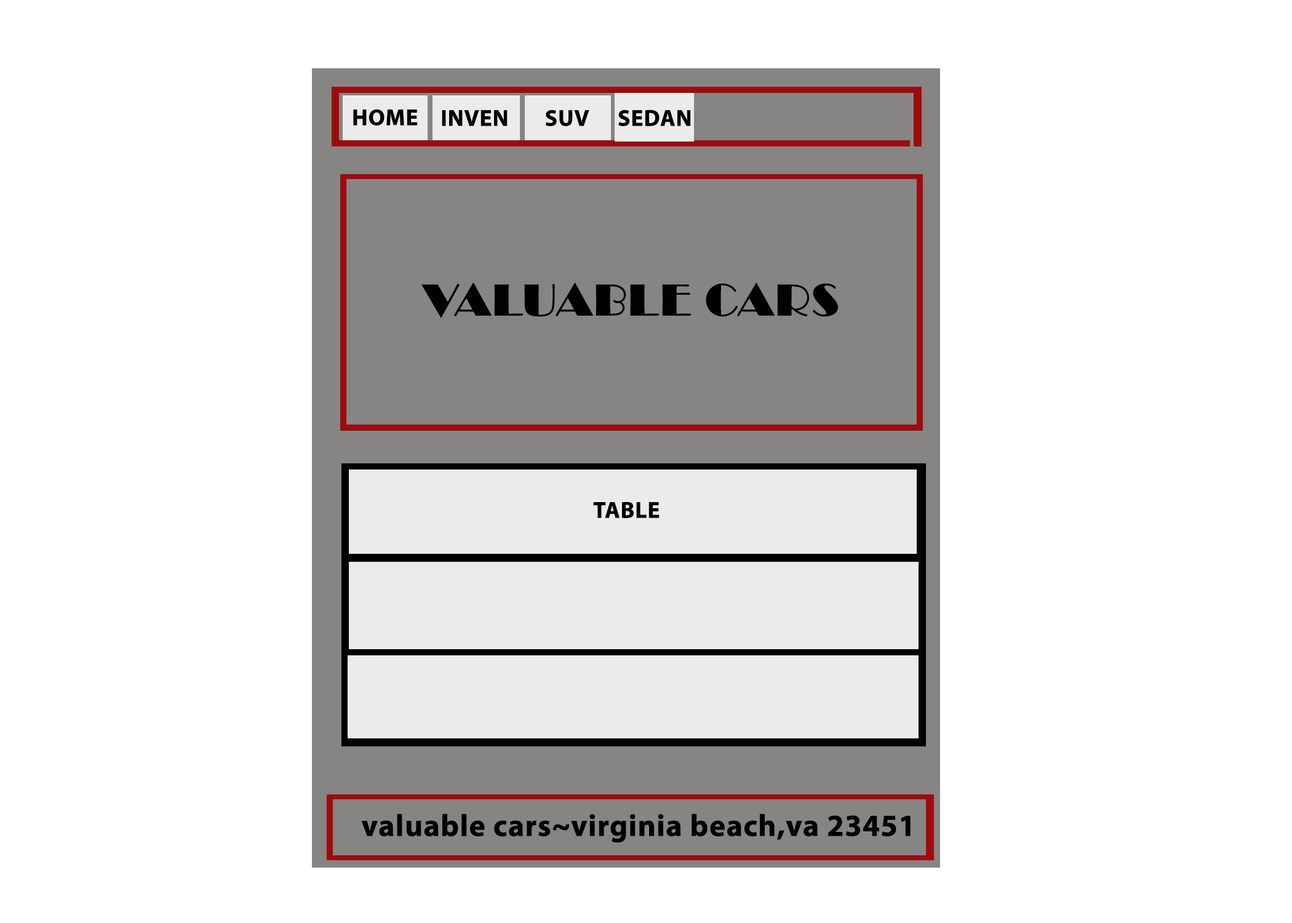
<style>
.page{position:relative;width:1292px;height:923px;background:#ffffff}
.page>*{position:absolute;margin:0}
.t1{font:23.1px "MyriadPro-Bold";color:#010101;font-weight:bold}
.t2{font:46.1px "Broadway";color:#010101;font-weight:bold}
.t3{font:30.8px "MyriadPro-Bold";color:#010101;font-weight:bold}
</style>
<div class="page">
<p class="t1" style="left:353px;top:109px;width:65px;height:17px">HOME</p>
<p class="t1" style="left:442px;top:110px;width:66px;height:16px">INVEN</p>
<p class="t1" style="left:546px;top:110px;width:43px;height:16px">SUV</p>
<p class="t1" style="left:618px;top:110px;width:73px;height:16px">SEDAN</p>
<p class="t2" style="left:421px;top:282px;width:417px;height:36px">VALUABLE CARS</p>
<p class="t1" style="left:593px;top:501px;width:67px;height:17px">TABLE</p>
<p class="t3" style="left:361px;top:813px;width:550px;height:30px">valuable cars~virginia beach,va 23451</p>
</div>
